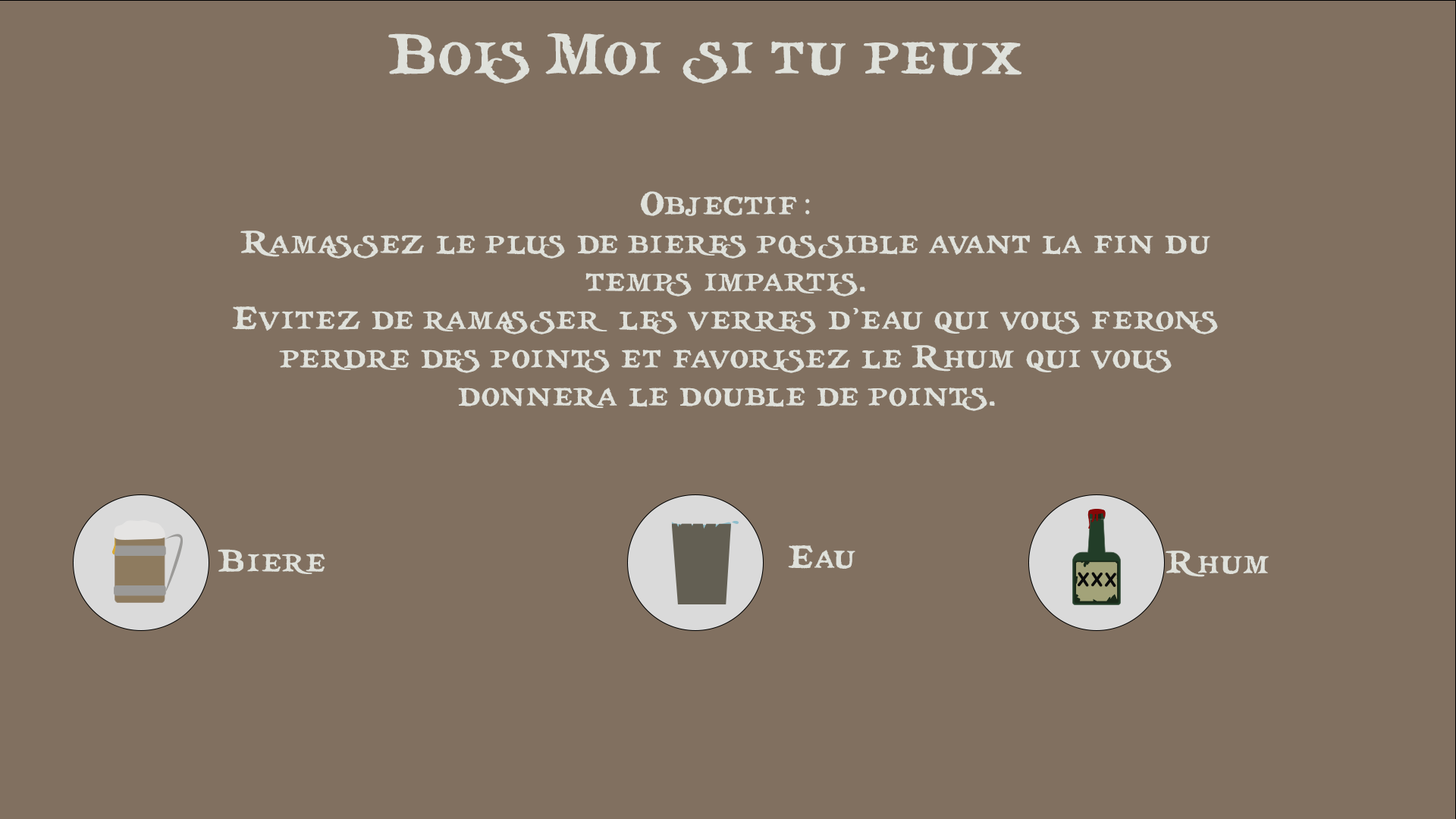
<style>
.page{position:relative;width:1456px;height:819px;background:#817060}
.page>*{position:absolute;margin:0}
.t1{font:57.6px "treasuremap";color:#dfe1db}
.t2{font:31.8px "treasuremap";color:#dfe1db}
.t3{font:31.8px "MyriadPro-Regular";color:#dfe1db}
</style>
<div class="page">
<p class="t1" style="left:388px;top:33px;width:633px;height:51px">Bois Moi si tu peux</p>
<p class="t2" style="left:232px;top:191px;width:986px;height:220px;text-align:center">Objectif<span class="t3"> : <br></span>Ramassez le plus de bieres possible avant la fin du temps impartis.<br>Evitez de ramasser les verres d’eau qui vous ferons perdre des points et favorisez le Rhum qui vous donnera le double de points.</p>
<p class="t2" style="left:788px;top:545px;width:67px;height:24px">Eau</p>
<p class="t2" style="left:218px;top:549px;width:107px;height:25px">Biere</p>
<p class="t2" style="left:1166px;top:551px;width:103px;height:26px">Rhum</p>
</div>
